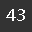
<style>
.page{position:relative;width:32px;height:32px;background:#333333}
.page>*{position:absolute;margin:0}
.t1{font:17.8px "MyriadPro-Regular";color:#ffffff;scale:1.12 1}
</style>
<div class="page">
<p class="t1" style="left:6px;top:9px;width:19px;height:12px">43</p>
</div>
